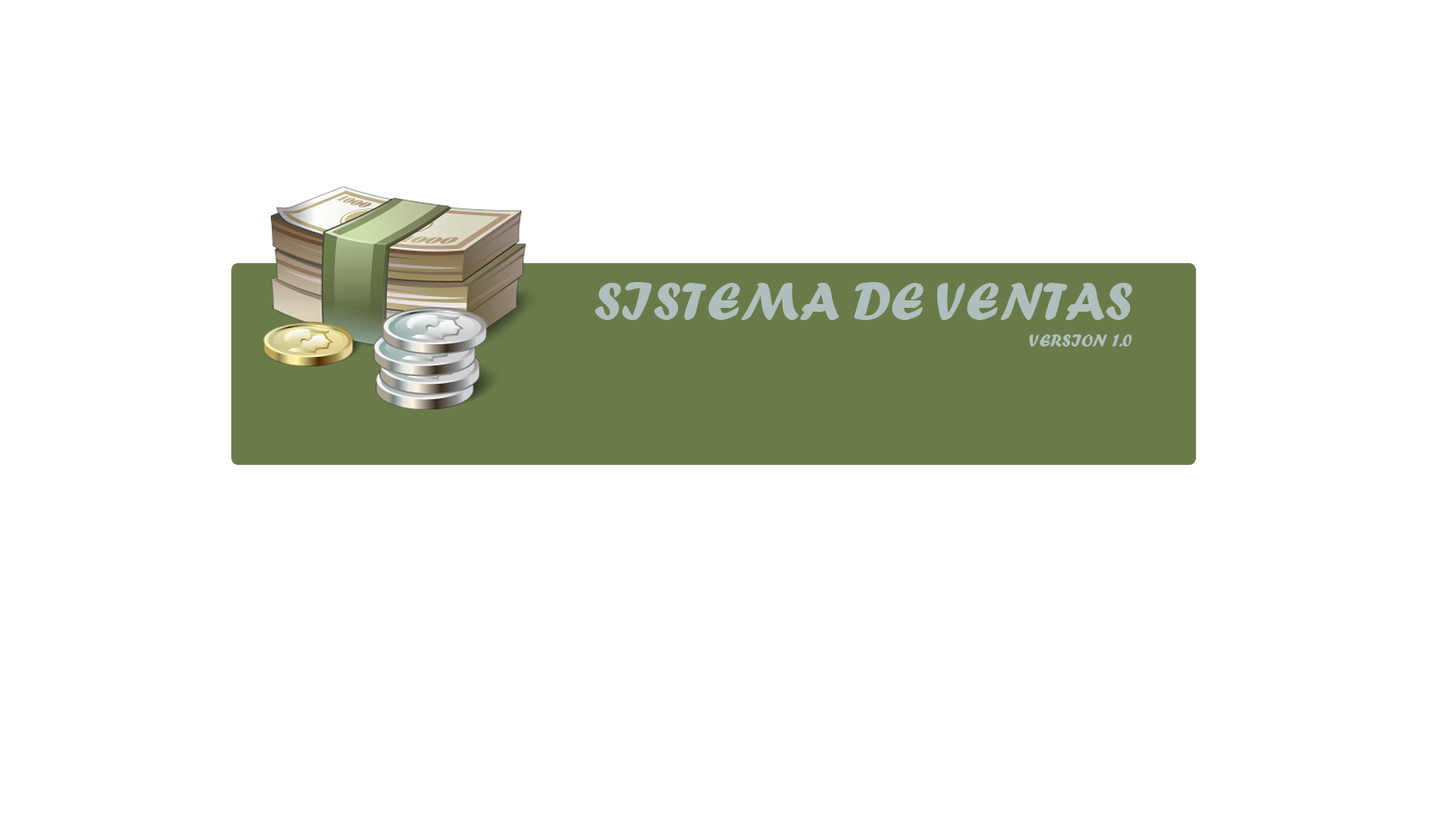
<style>
.page{position:relative;width:1456px;height:819px;background:#ffffff}
.page>*{position:absolute;margin:0}
.t1{font:54.6px "ForteMT";color:#b0bebd}
.t2{font:18.2px "ForteMT";color:#b0bebd}
</style>
<div class="page">
<p class="t1" style="left:595px;top:282px;width:537px;height:38px">SISTEMA DE VENTAS</p>
<p class="t2" style="left:1029px;top:334px;width:103px;height:13px">VERSION 1.0</p>
</div>
